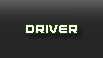
<style>
.page{position:relative;width:103px;height:58px;background:#262626}
.page>*{position:absolute;margin:0}
.t1{font:13px "Usuzi";color:#fdf9f9}
</style>
<div class="page">
<p class="t1" style="left:26px;top:25px;width:51px;height:8px">Driver</p>
</div>
